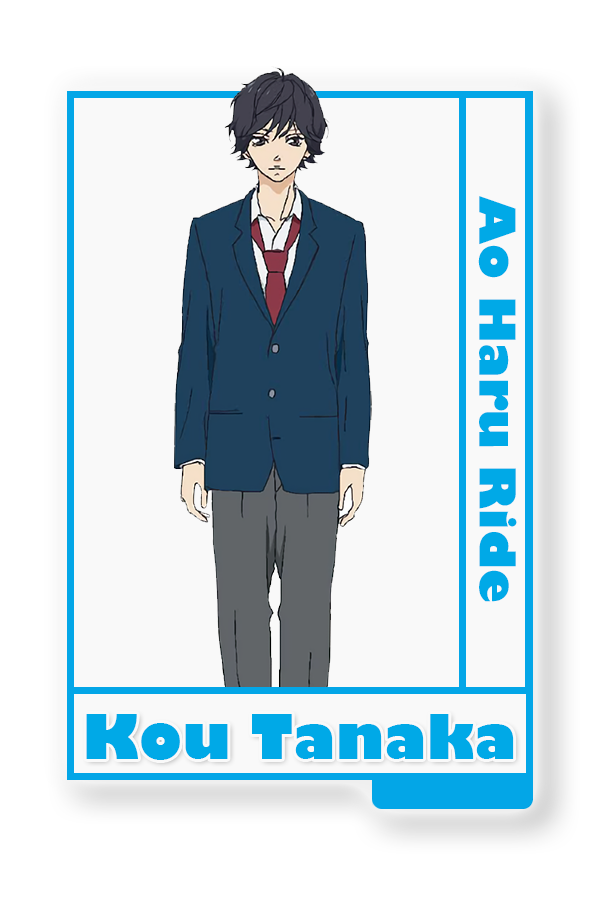
<style>
.page{position:relative;width:600px;height:900px;background:#f9f9f9}
.page>*{position:absolute;margin:0}
.t1{font:48.8px "GillSans-UltraBold";color:#00a9e7}
.t2{font:60.3px "GillSans-UltraBold";color:#00a9e7}
</style>
<div class="page">
<p class="t1" style="left:478px;top:196px;width:39px;height:406px;rotate:90deg">Ao Haru Ride</p>
<p class="t2" style="left:86px;top:714px;width:428px;height:46px">Kou Tanaka</p>
</div>
